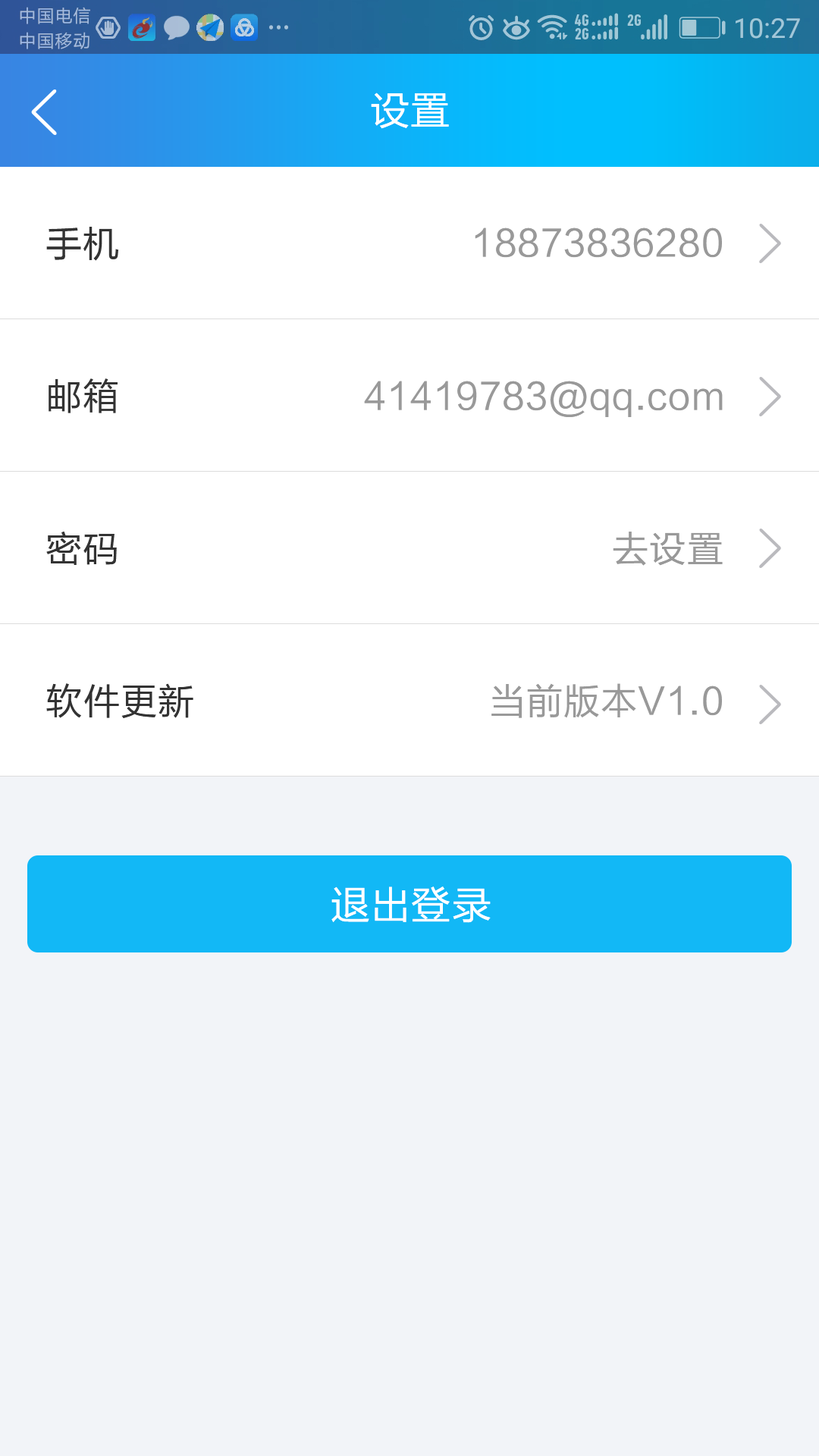
<style>
.page{position:relative;width:819px;height:1456px;background:#ffffff}
.page>*{position:absolute;margin:0}
.t1{font:39.4px "FZLTHK--GBK1-0";letter-spacing:0.025em;color:#ffffff}
.t2{font:36.4px "FZLTHK--GBK1-0";letter-spacing:0.025em;color:#333333}
.t3{font:36.4px "FZLTHK--GBK1-0";letter-spacing:0.025em;color:#999999}
</style>
<div class="page">
<p class="t1" style="left:371px;top:93px;width:78px;height:36px">设置</p>
<p class="t2" style="left:46px;top:227px;width:73px;height:34px">手机</p>
<p class="t3" style="left:475px;top:227px;width:247px;height:31px">18873836280</p>
<p class="t2" style="left:49px;top:378px;width:69px;height:35px">邮箱</p>
<p class="t3" style="left:364px;top:381px;width:359px;height:36px">41419783@qq.com</p>
<p class="t2" style="left:46px;top:531px;width:71px;height:34px">密码</p>
<p class="t3" style="left:613px;top:532px;width:110px;height:34px">去设置</p>
<p class="t2" style="left:46px;top:683px;width:147px;height:35px">软件更新</p>
<p class="t3" style="left:491px;top:683px;width:231px;height:35px">当前版本V1.0</p>
<p class="t1" style="left:331px;top:886px;width:160px;height:37px">退出登录</p>
</div>
